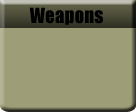
<style>
.page{position:relative;width:136px;height:112px;background:#9d9d77}
.page>*{position:absolute;margin:0}
.t1{font:19.2px "Impact";color:#000000}
</style>
<div class="page">
<p class="t1" style="left:29px;top:7px;width:74px;height:18px">Weapons</p>
</div>
